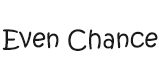
<style>
.page{position:relative;width:160px;height:75px;background:#ffffff}
.page>*{position:absolute;margin:0}
.t1{font:24px "KristenITC-Regular";color:#1b1919}
</style>
<div class="page">
<p class="t1" style="left:2px;top:29px;width:156px;height:22px">Even Chance</p>
</div>
